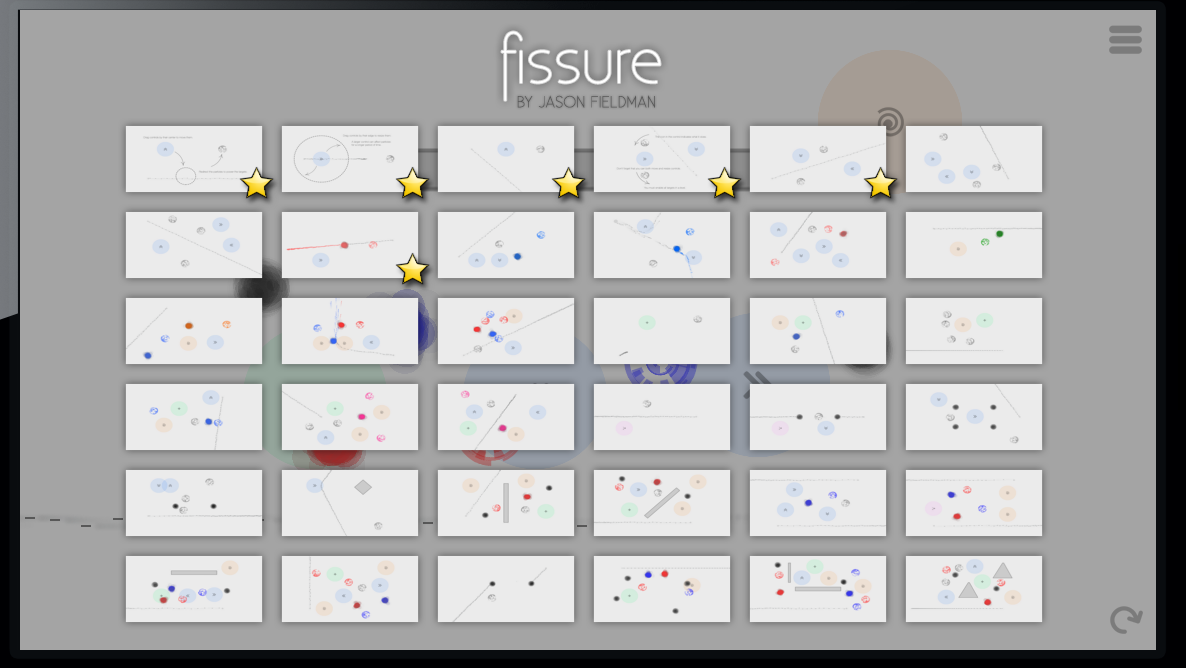
<style>
.page{position:relative;width:1186px;height:668px;background:#ebebeb}
.page>*{position:absolute;margin:0}
.t1{font:60px "Existence-Light";color:#ffffff}
.t2{font:16px "Existence-Light";color:#565656}
</style>
<div class="page">
<p class="t1" style="left:501px;top:31px;width:160px;height:70px">fissure</p>
<p class="t2" style="left:517px;top:95px;width:138px;height:13px">BY JASON FIELDMAN</p>
</div>
